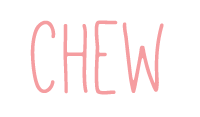
<style>
.page{position:relative;width:200px;height:117px;background:#ffffff}
.page>*{position:absolute;margin:0}
.t1{font:114px "Mathlete-Skinny";color:#f59da0}
</style>
<div class="page">
<p class="t1" style="left:30px;top:20px;width:134px;height:75px">Chew</p>
</div>
